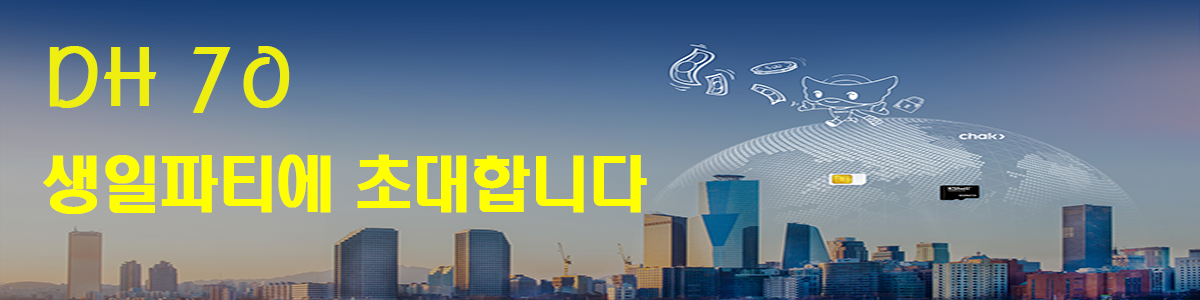
<style>
.page{position:relative;width:1200px;height:300px}
.page>*{position:absolute;margin:0}
.t1{font:60px/100px "H2hdrM";letter-spacing:-0.05em;color:#ffff01;font-weight:bold}
.t2{font:80px/100px "H2porM";letter-spacing:-0.05em;color:#eeee11;font-weight:bold}
</style>
<div class="page">
<p class="t1" style="left:43px;top:46px;width:604px;height:168px"><span class="t2">DH 70</span> <br>생일파티에 초대합니다</p>
</div>
